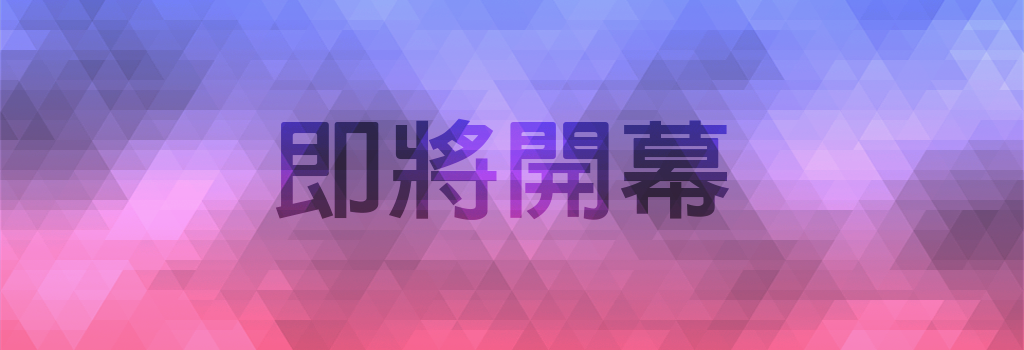
<style>
.page{position:relative;width:1024px;height:350px}
.page>*{position:absolute;margin:0}
.t1{font:109px "linGothic-Extra";scale:1.06 1}
</style>
<div class="page">
<p class="t1" style="left:275px;top:118px;width:455px;height:102px">即將開幕</p>
<p class="t1" style="left:275px;top:118px;width:455px;height:102px">即將開幕</p>
</div>
